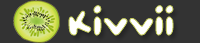
<style>
.page{position:relative;width:200px;height:43px;background:#333333}
.page>*{position:absolute;margin:0}
.t1{font:42px "porcupine";letter-spacing:0.03em;color:#ffffff}
</style>
<div class="page">
<p class="t1" style="left:69px;top:5px;width:104px;height:30px">kivvii</p>
</div>
